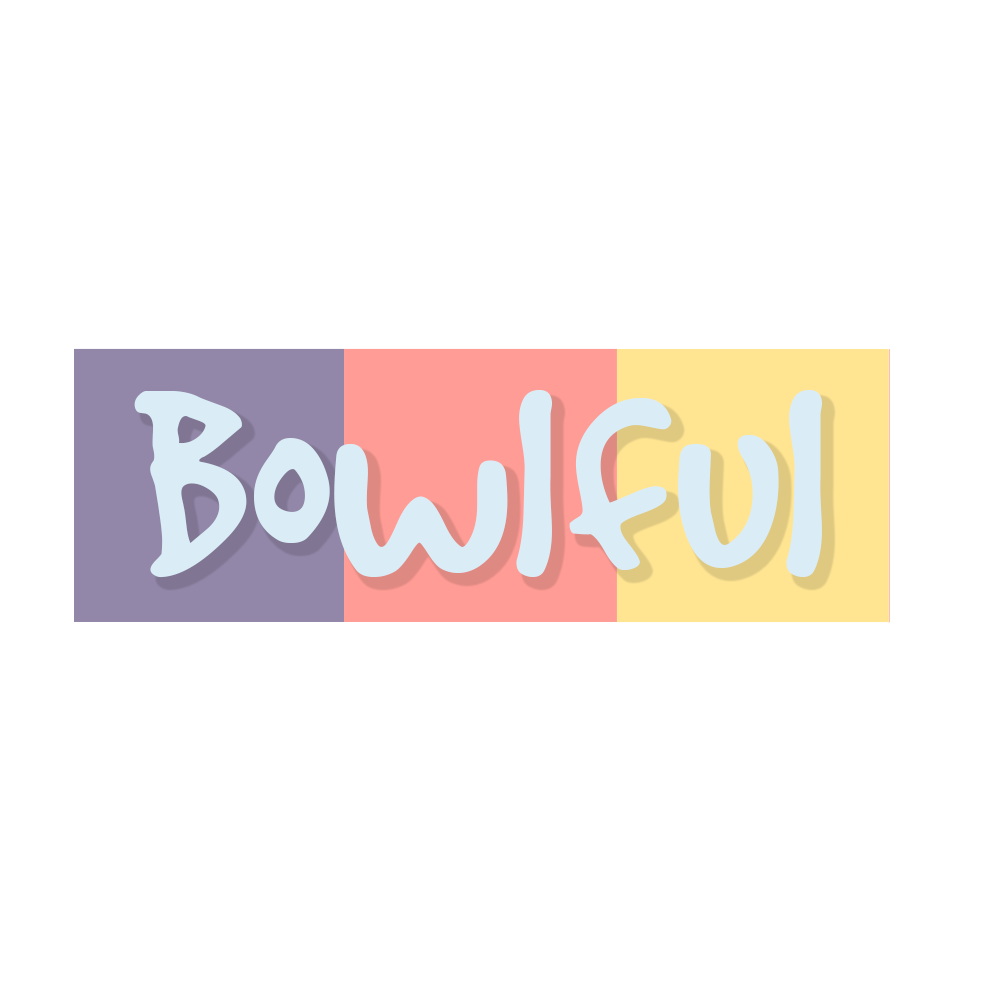
<style>
.page{position:relative;width:1000px;height:1000px;background:#ffffff}
.page>*{position:absolute;margin:0}
.t1{font:293px "GoodDogPlain";color:#daedf6}
</style>
<div class="page">
<p class="t1" style="left:134px;top:390px;width:689px;height:188px">Bowlful</p>
</div>
